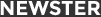
<style>
.page{position:relative;width:101px;height:17px;background:#333333}
.page>*{position:absolute;margin:0}
.t1{font:20px "Montserrat-Bold";color:#ffffff}
</style>
<div class="page">
<p class="t1" style="left:0px;top:0px;width:101px;height:16px">NEWSTER</p>
</div>
